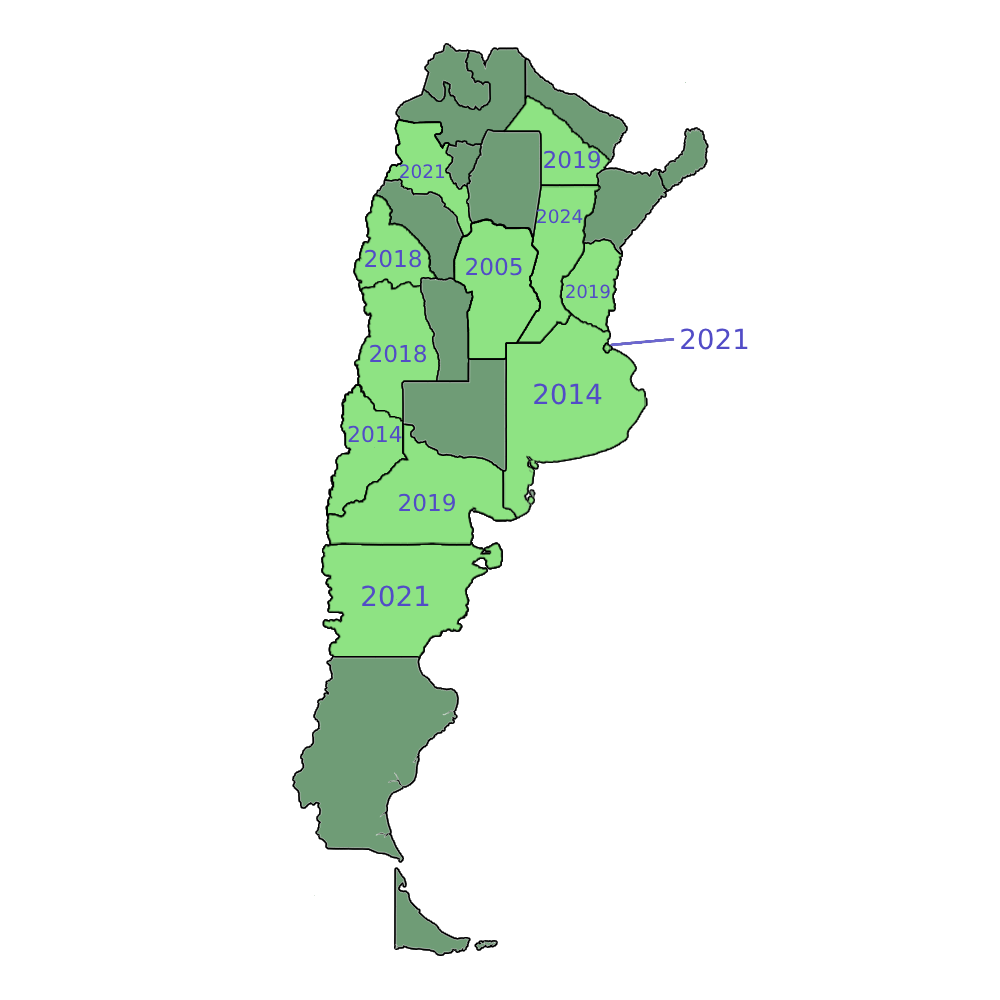
<style>
.page{position:relative;width:1000px;height:1000px;background:#ffffff}
.page>*{position:absolute;margin:0}
.t1{font:23.2px "DejaVuSans";color:#524cc7}
.t2{font:18.4px "DejaVuSans";color:#524cc7}
.t3{font:18.7px "DejaVuSans";color:#524cc7}
.t4{font:18.1px "DejaVuSans";color:#524cc7}
.t5{font:27.7px "DejaVuSans";color:#524cc7}
.t6{font:21.8px "DejaVuSans";color:#524cc7}
</style>
<div class="page">
<p class="t1" style="left:544px;top:150px;width:56px;height:19px">2019</p>
<p class="t2" style="left:400px;top:164px;width:45px;height:15px">2021</p>
<p class="t3" style="left:537px;top:209px;width:46px;height:15px">2024</p>
<p class="t1" style="left:365px;top:249px;width:56px;height:19px">2018</p>
<p class="t1" style="left:466px;top:257px;width:56px;height:19px">2005</p>
<p class="t4" style="left:566px;top:284px;width:44px;height:15px">2019</p>
<p class="t5" style="left:681px;top:328px;width:67px;height:22px">2021</p>
<p class="t1" style="left:370px;top:344px;width:56px;height:19px">2018</p>
<p class="t5" style="left:534px;top:383px;width:68px;height:22px">2014</p>
<p class="t6" style="left:348px;top:425px;width:54px;height:18px">2014</p>
<p class="t1" style="left:399px;top:493px;width:56px;height:19px">2019</p>
<p class="t5" style="left:362px;top:585px;width:67px;height:22px">2021</p>
</div>
